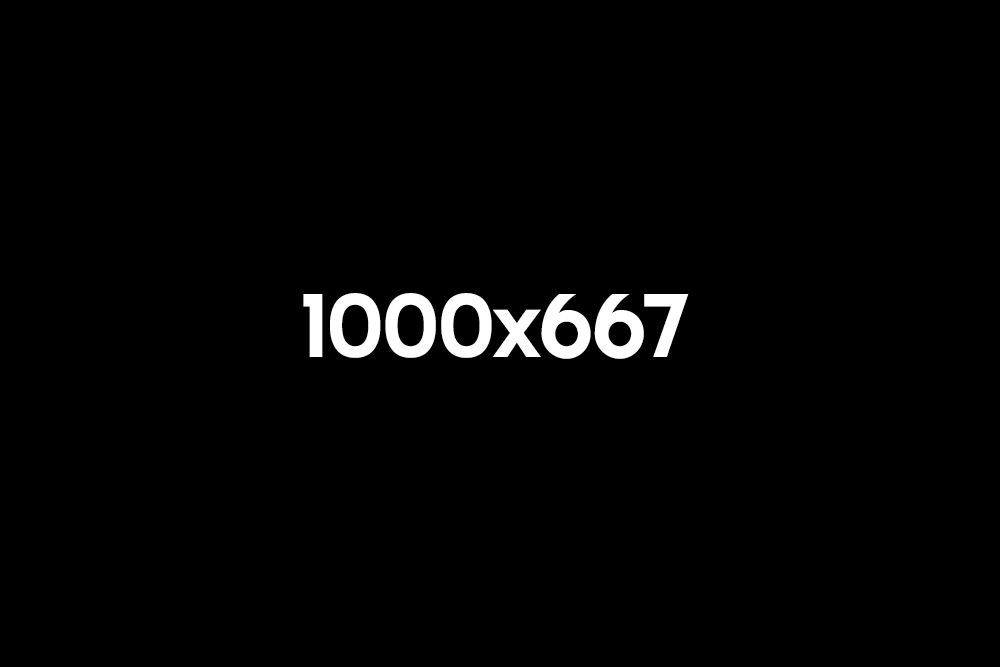
<style>
.page{position:relative;width:1000px;height:667px;background:#000000}
.page>*{position:absolute;margin:0}
.t1{font:90px "Righteous-Regular";letter-spacing:-0.025em;color:#ffffff}
</style>
<div class="page">
<p class="t1" style="left:303px;top:293px;width:386px;height:66px">1000x667</p>
</div>
